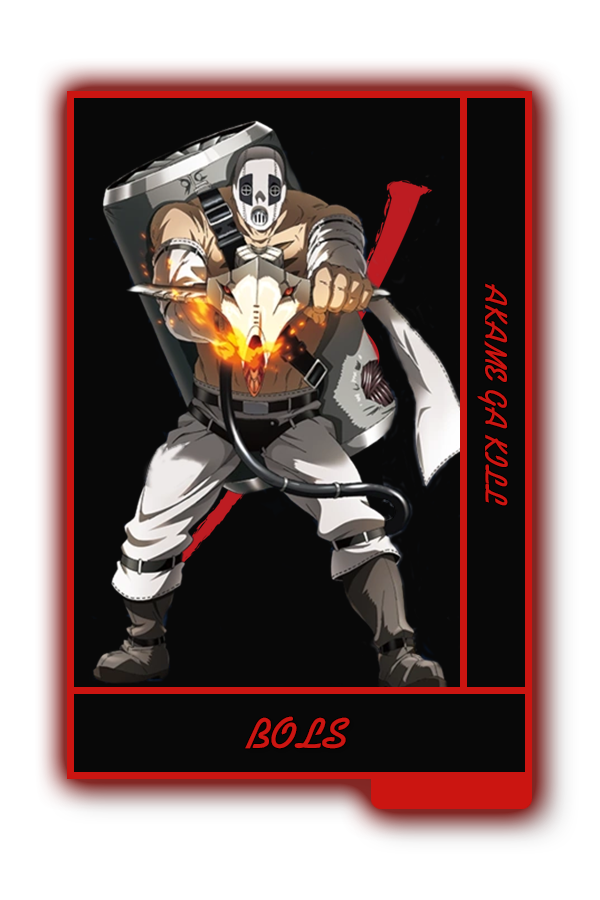
<style>
.page{position:relative;width:600px;height:900px;background:#080808}
.page>*{position:absolute;margin:0}
.t1{font:31.2px "Alako-Bold";color:#cb1511}
.t2{font:43.2px "Alako-Bold";color:#cb1511}
</style>
<div class="page">
<p class="t1" style="left:477px;top:283px;width:31px;height:223px;rotate:90deg">AKAME GA KILL</p>
<p class="t2" style="left:245px;top:716px;width:105px;height:33px">BOLS</p>
</div>
